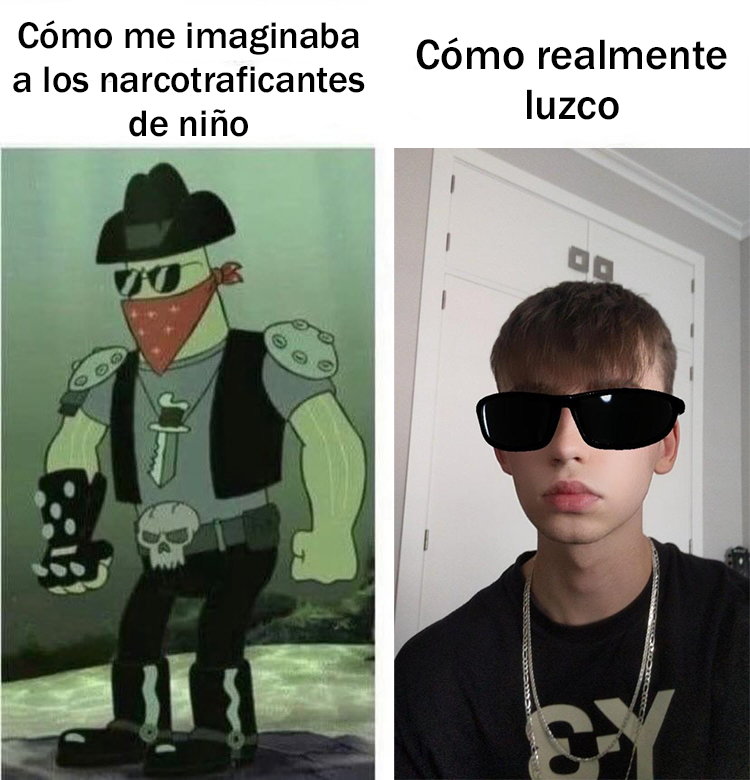
<style>
.page{position:relative;width:750px;height:780px}
.page>*{position:absolute;margin:0}
.t1{font:38.2px "FranklinGothic-Medium";color:#000000}
.t2{font:43.7px "FranklinGothic-Medium";color:#000000}
</style>
<div class="page">
<p class="t1" style="left:13px;top:20px;width:352px;height:117px;text-align:center">Cómo me imaginaba<br>a los narcotraficantes<br>de niño</p>
<p class="t2" style="left:416px;top:37px;width:311px;height:83px;text-align:center">Cómo realmente<br>luzco</p>
</div>
